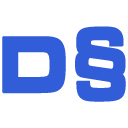
<style>
.page{position:relative;width:128px;height:128px;background:#ffffff}
.page>*{position:absolute;margin:0}
.t1{font:82px "MicrogrammaD-BoldExte";color:#325dd8;font-weight:bold;scale:0.85 1}
</style>
<div class="page">
<p class="t1" style="left:2px;top:26px;width:124px;height:76px">D§</p>
</div>
